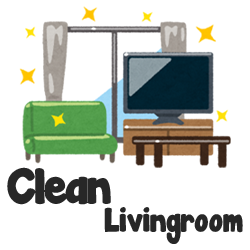
<style>
.page{position:relative;width:250px;height:250px;background:#ffffff}
.page>*{position:absolute;margin:0}
.t1{font:45px "JandaManateeSolid";letter-spacing:-0.04em;color:#272727}
.t2{font:30px "JandaManateeSolid";letter-spacing:-0.02em;color:#272727}
</style>
<div class="page">
<p class="t1" style="left:7px;top:167px;width:104px;height:38px">Clean</p>
<p class="t2" style="left:104px;top:207px;width:139px;height:37px">Livingroom</p>
</div>
